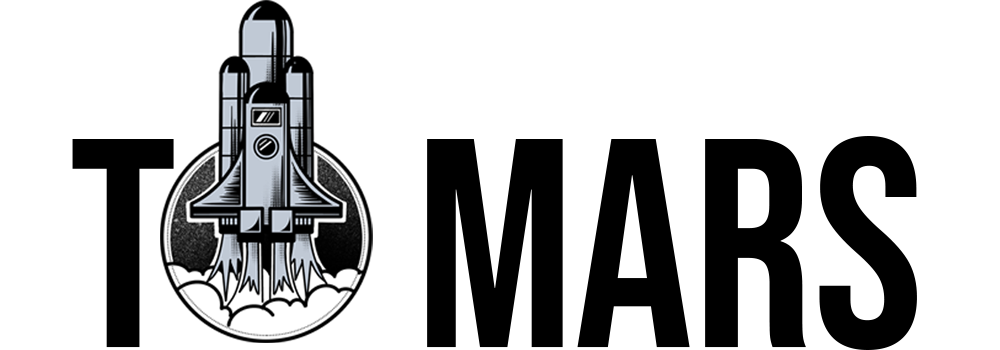
<style>
.page{position:relative;width:1000px;height:350px;background:#ffffff}
.page>*{position:absolute;margin:0}
.t1{font:297.1px "BebasNeue-Regular";color:#000000}
</style>
<div class="page">
<p class="t1" style="left:72px;top:136px;width:845px;height:214px">t     mars</p>
</div>
